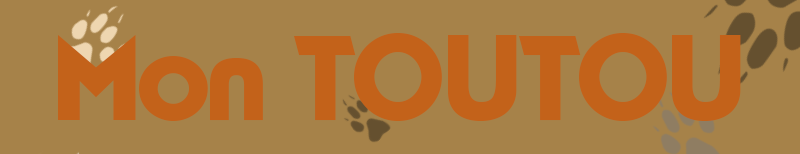
<style>
.page{position:relative;width:800px;height:154px;background:#a68249}
.page>*{position:absolute;margin:0}
.t1{font:120px "TypoGraphica";color:#c3621a}
</style>
<div class="page">
<p class="t1" style="left:58px;top:33px;width:683px;height:88px">Mon   TOUTOU</p>
</div>
